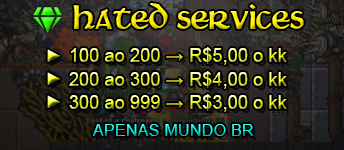
<style>
.page{position:relative;width:344px;height:150px}
.page>*{position:absolute;margin:0}
.t1{font:36.9px "Martel"}
.t2{font:17.9px "ArialMT";scale:0.97 1}
.t3{font:18.6px "ArialMT"}
.t4{font:16.1px "ArialMT"}
</style>
<div class="page">
<p class="t1" style="left:73px;top:3px;width:231px;height:26px">hated services</p>
<p class="t2" style="left:47px;top:49px;width:13px;height:13px">►</p>
<p class="t3" style="left:70px;top:47px;width:217px;height:18px">100 ao 200 → R$5,00 o kk</p>
<p class="t2" style="left:47px;top:72px;width:13px;height:13px">►</p>
<p class="t3" style="left:69px;top:71px;width:218px;height:18px">200 ao 300 → R$4,00 o kk</p>
<p class="t2" style="left:47px;top:95px;width:13px;height:13px">►</p>
<p class="t3" style="left:69px;top:94px;width:218px;height:18px">300 ao 999 → R$3,00 o kk</p>
<p class="t4" style="left:93px;top:124px;width:161px;height:12px">APENAS MUNDO BR</p>
</div>
